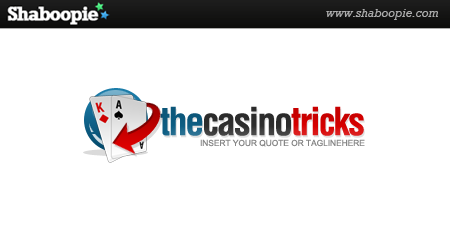
<style>
.page{position:relative;width:450px;height:250px;background:#ffffff}
.page>*{position:absolute;margin:0}
.t1{font:37.5px "Helvetica-Condensed-Bold";letter-spacing:-0.05em;color:#2e2e2e}
.t2{font:37.5px "Helvetica-Condensed-Bold";letter-spacing:-0.05em;color:#0d5e84}
.t3{font:37.5px "Helvetica-Condensed-Bold";letter-spacing:-0.05em;color:#d70000}
.t4{font:8.3px "ArialMT";color:#868686}
</style>
<div class="page">
<p class="t1" style="left:160px;top:106px;width:204px;height:30px"><span class="t2">the</span>casino<span class="t3">tricks</span></p>
<p class="t4" style="left:200px;top:139px;width:165px;height:8px">INSERT YOUR QUOTE OR TAGLINEHERE</p>
</div>
